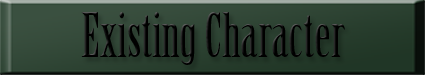
<style>
.page{position:relative;width:425px;height:75px}
.page>*{position:absolute;margin:0}
.t1{font:60px "BirchStd";color:#000000}
</style>
<div class="page">
<p class="t1" style="left:81px;top:12px;width:264px;height:53px">Existing Character</p>
</div>
